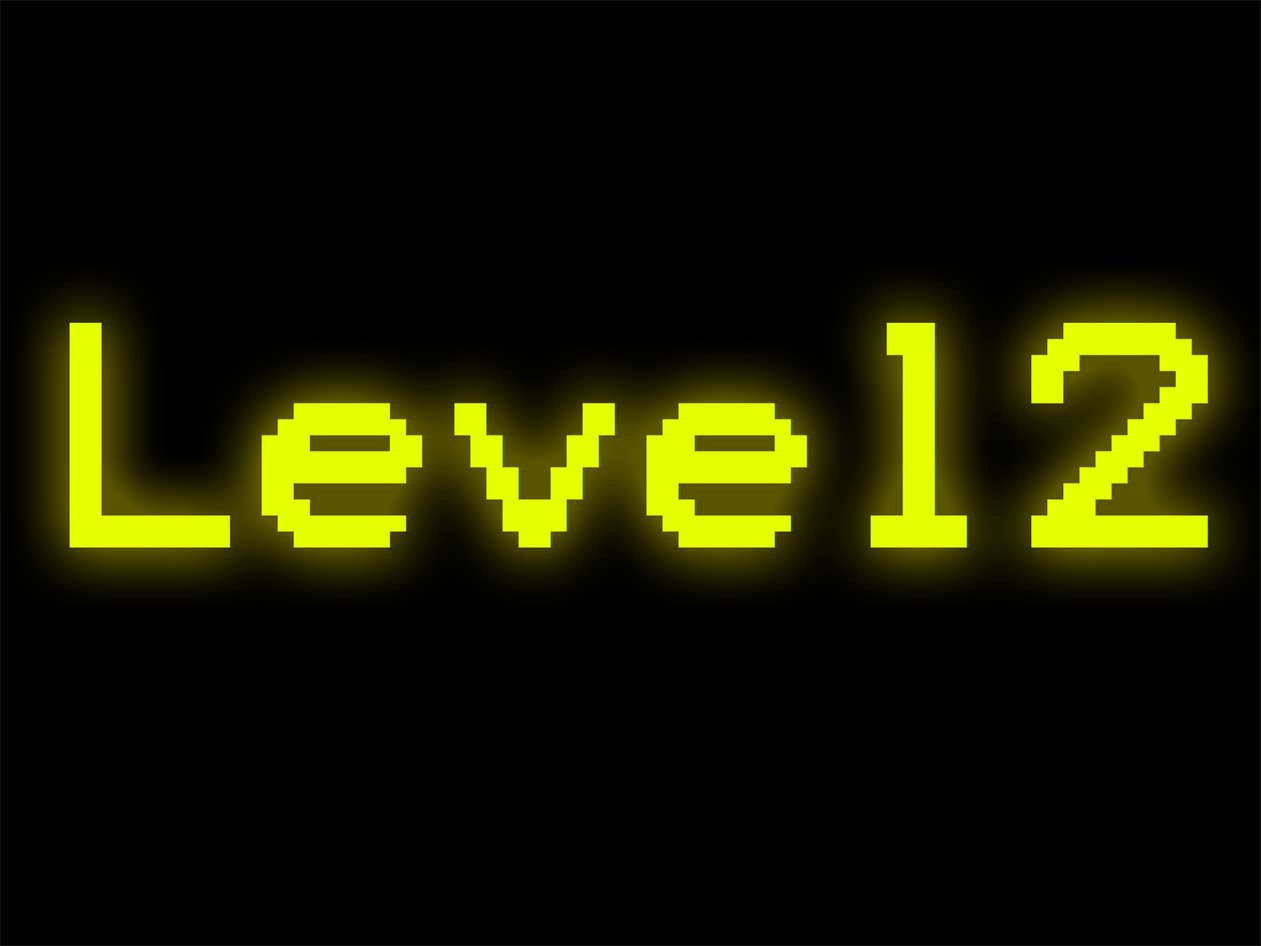
<style>
.page{position:relative;width:1261px;height:946px;background:#000000}
.page>*{position:absolute;margin:0}
.t1{font:256.5px "Terminal";color:#e4ff00}
</style>
<div class="page">
<p class="t1" style="left:70px;top:323px;width:1138px;height:224px">Level2</p>
</div>
